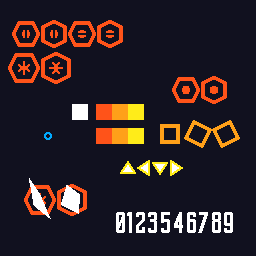
<style>
.page{position:relative;width:256px;height:256px;background:#11111f}
.page>*{position:absolute;margin:0}
.t1{font:30px "ReckonerBold";letter-spacing:0.05em;color:#ffffff}
</style>
<div class="page">
<p class="t1" style="left:116px;top:212px;width:117px;height:21px">0123546789</p>
</div>
